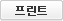
<style>
.page{position:relative;width:63px;height:21px}
.page>*{position:absolute;margin:0}
.t1{font:11px "YDIWebDotum";color:#333333;font-weight:bold}
</style>
<div class="page">
<p class="t1" style="left:15px;top:6px;width:32px;height:10px">프린트</p>
</div>
